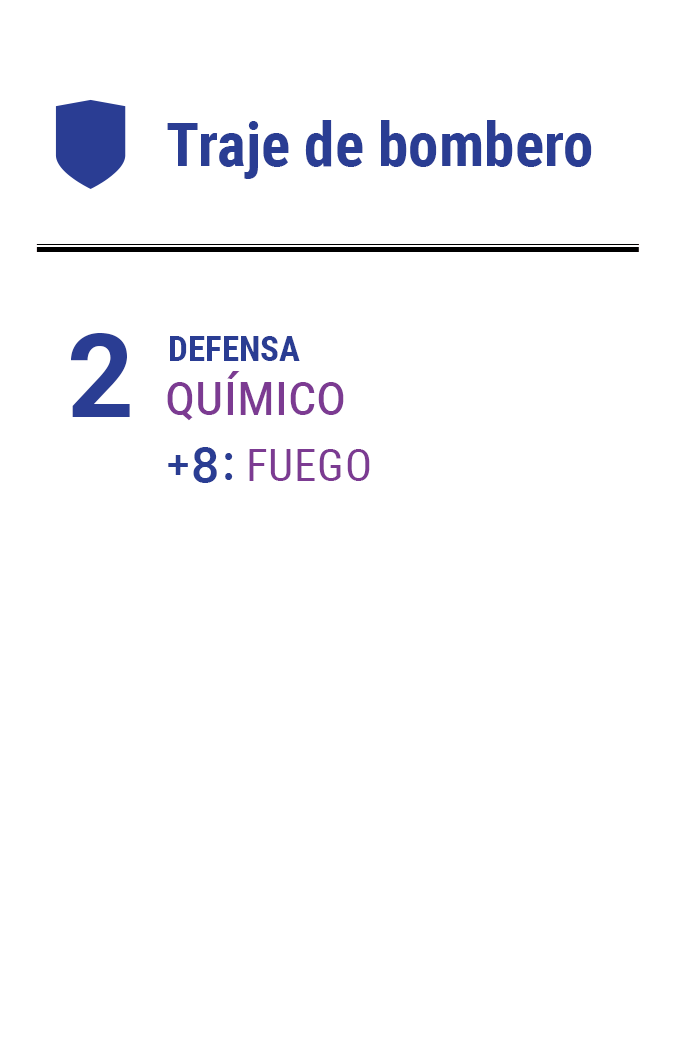
<style>
.page{position:relative;width:675px;height:1050px;background:#ffffff}
.page>*{position:absolute;margin:0}
.t1{font:61.2px "RobotoCondensed-Bold";color:#2a3d93}
.t2{font:116.7px "Roboto-Bold";letter-spacing:-0.16em;color:#2a3d93}
.t3{font:35px "RobotoCondensed-Bold";color:#2a3d93}
.t4{font:58.3px "RobotoCondensed-Regular";color:#7c3b92;font-variant:small-caps}
.t5{font:49.8px "Roboto-Medium";letter-spacing:-0.1em;color:#2a3d93}
.t6{font:39.7px "Roboto-Medium";letter-spacing:-0.1em;color:#2a3d93}
.t7{font:44.6px "RobotoCondensed-Regular";letter-spacing:0.02em;color:#7c3b92;text-transform:uppercase}
</style>
<div class="page">
<p class="t1" style="left:167px;top:120px;width:425px;height:59px">Traje de bombero</p>
<p class="t2" style="left:71px;top:333px;width:59px;height:84px">2</p>
<p class="t3" style="left:170px;top:336px;width:130px;height:25px">DEFENSA</p>
<p class="t4" style="left:167px;top:371px;width:177px;height:50px">químico</p>
<p class="t5" style="left:168px;top:447px;width:65px;height:36px"><span class="t6">+ </span>8 :</p>
<p class="t7" style="left:249px;top:449px;width:121px;height:32px">fuego</p>
</div>
